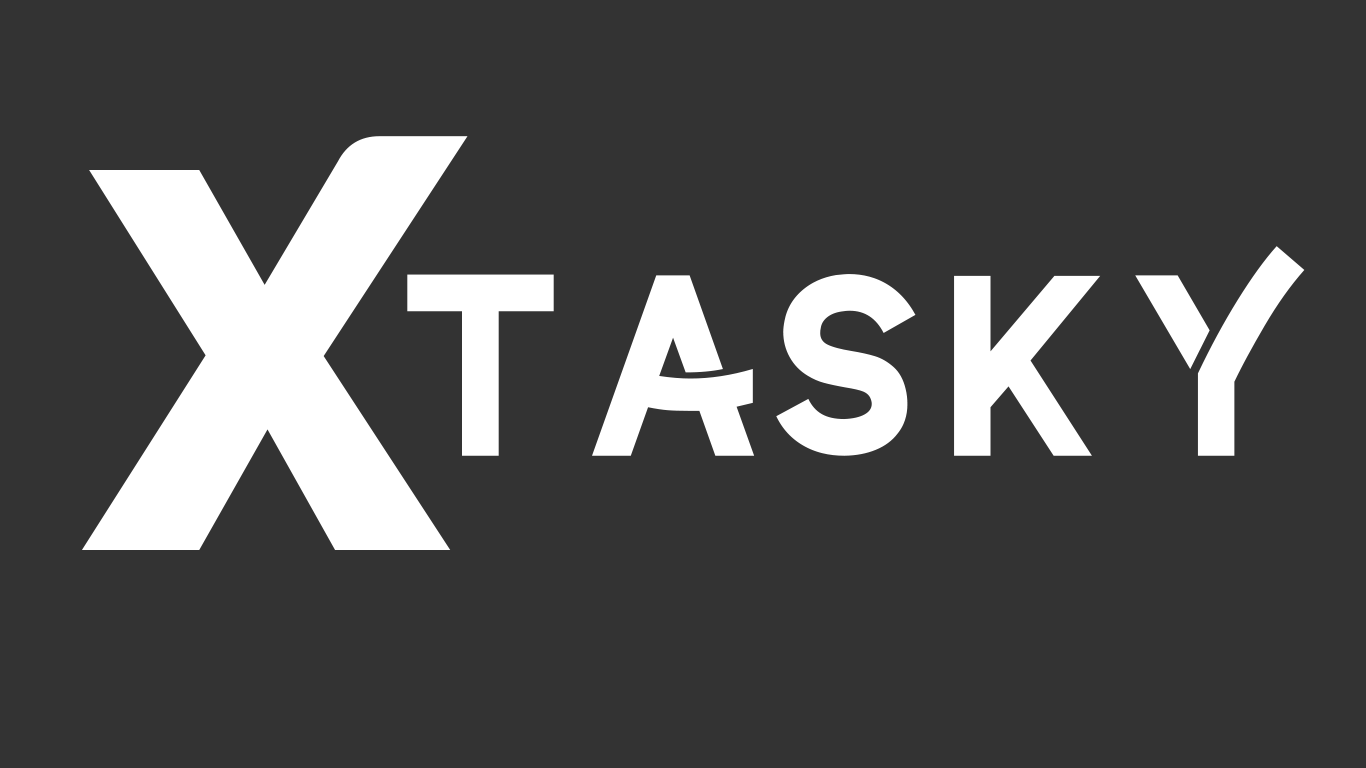
<style>
.page{position:relative;width:1366px;height:768px;background:#333333}
.page>*{position:absolute;margin:0}
.t1{font:719.1px "HarabaraMaisBold-HarabaraMaisBold";letter-spacing:0.022em;color:#ffffff}
.t2{font:258px "Coyote-SemiBoldDEMO";letter-spacing:-0.118em;color:#ffffff}
</style>
<div class="page">
<p class="t1" style="left:81px;top:136px;width:387px;height:414px">x</p>
<p class="t2" style="left:407px;top:246px;width:898px;height:210px">TASKY</p>
</div>
